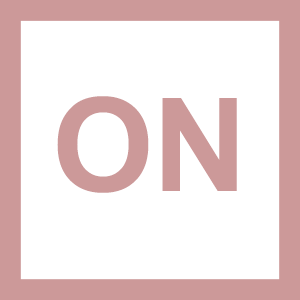
<style>
.page{position:relative;width:300px;height:300px;background:#ffffff}
.page>*{position:absolute;margin:0}
.t1{font:130.1px "Arial-BoldMT";color:#cc9999}
</style>
<div class="page">
<p class="t1" style="left:57px;top:96px;width:180px;height:97px">ON</p>
</div>
